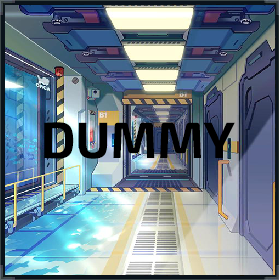
<style>
.page{position:relative;width:279px;height:280px}
.page>*{position:absolute;margin:0}
.t1{font:51px "Exo2Roman-Bold";color:#000000;font-weight:bold}
</style>
<div class="page">
<p class="t1" style="left:44px;top:122px;width:191px;height:37px">DUMMY</p>
</div>
